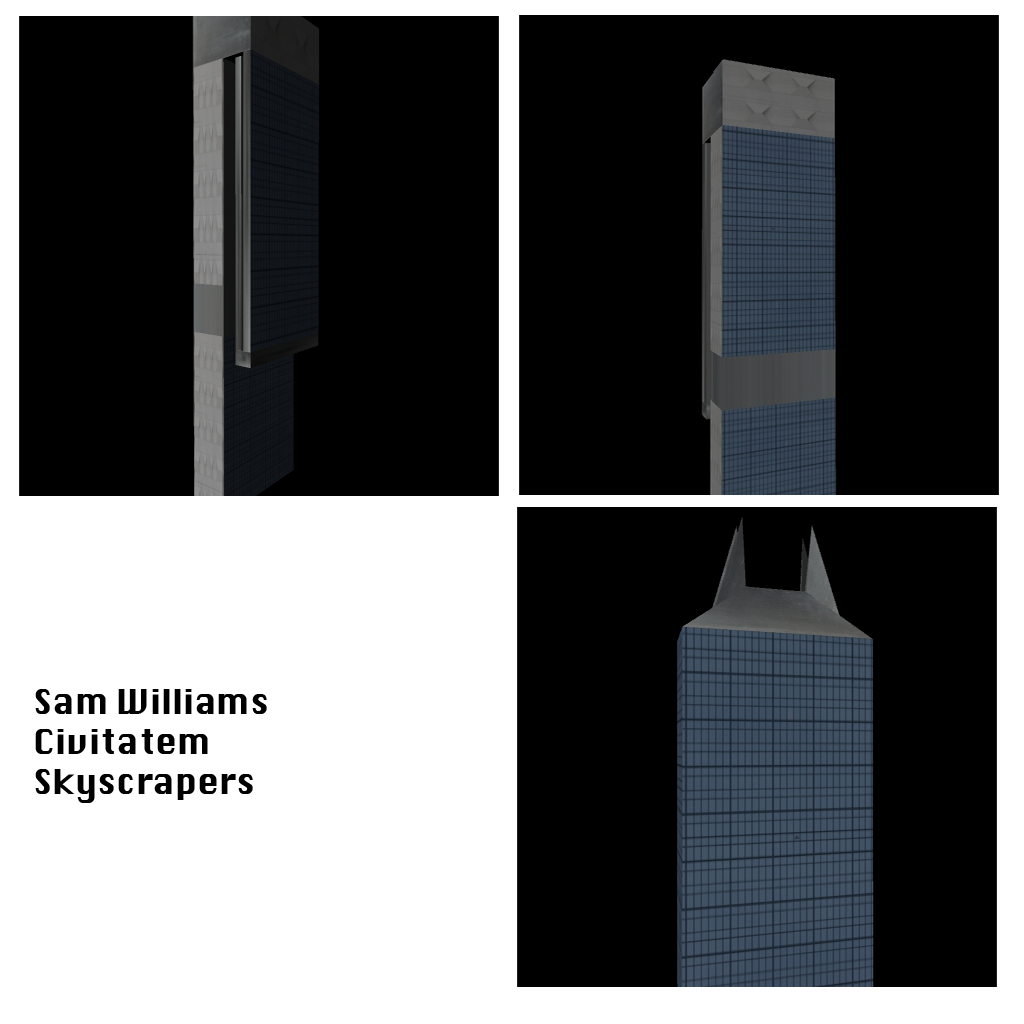
<style>
.page{position:relative;width:1024px;height:1024px;background:#000000}
.page>*{position:absolute;margin:0}
.t1{font:33.3px "Silom";color:#000000}
</style>
<div class="page">
<p class="t1" style="left:35px;top:689px;width:232px;height:114px">Sam Williams<br>Civitatem<br>Skyscrapers</p>
</div>
